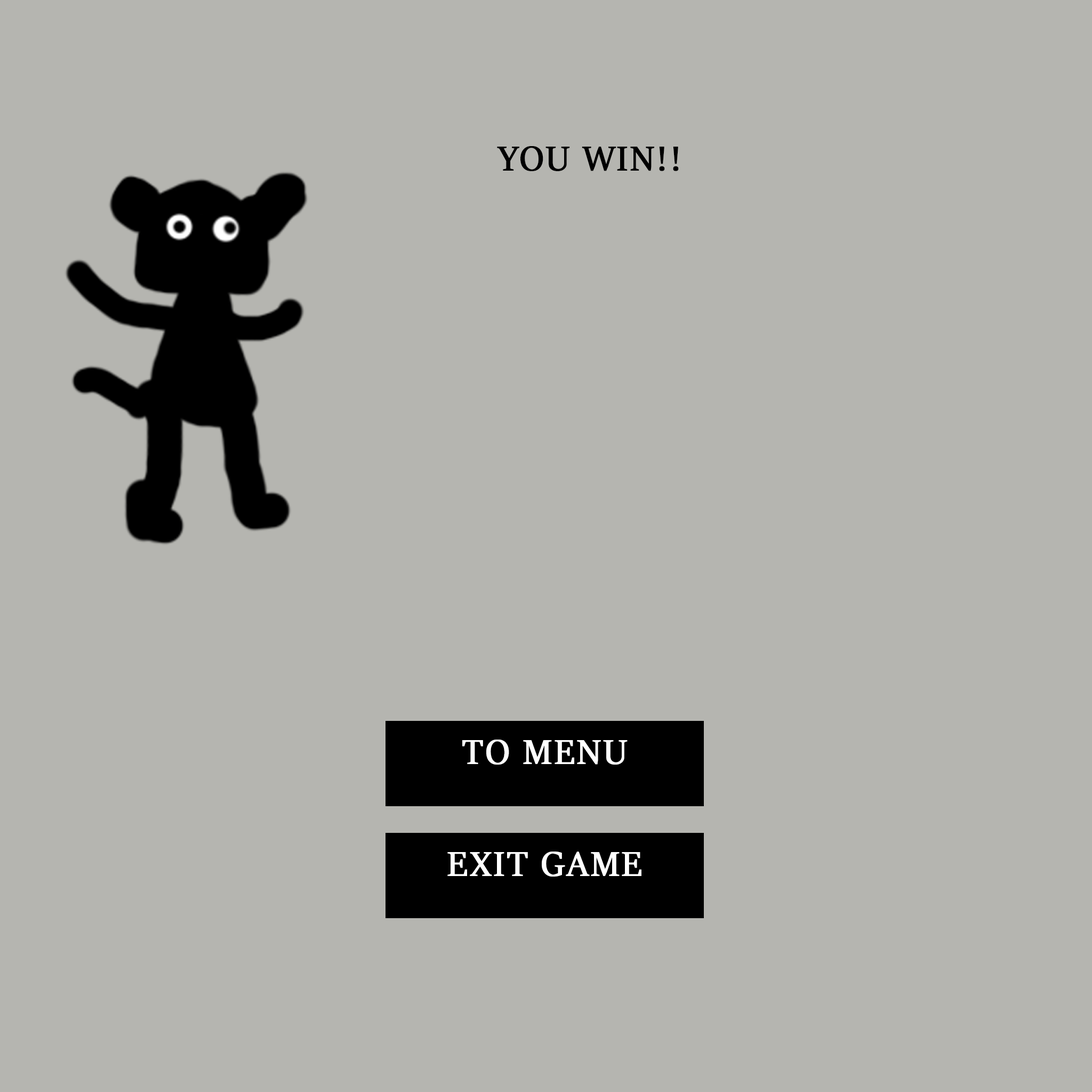
<style>
.page{position:relative;width:1092px;height:1092px;background:#b5b5b0}
.page>*{position:absolute;margin:0}
.t1{font:38.4px "SitkaBanner";letter-spacing:0.04em;color:#000000;text-transform:uppercase;font-weight:bold}
.t2{font:38.4px "SitkaBanner";letter-spacing:0.04em;color:#ffffff;text-transform:uppercase;font-weight:bold}
</style>
<div class="page">
<p class="t1" style="left:497px;top:146px;width:182px;height:25px">YOU WIN!!</p>
<p class="t2" style="left:462px;top:740px;width:166px;height:25px">To Menu</p>
<p class="t2" style="left:447px;top:852px;width:194px;height:25px">Exit game</p>
</div>
